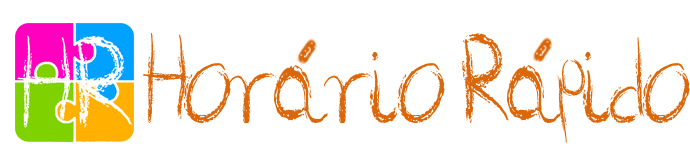
<style>
.page{position:relative;width:690px;height:168px;background:#ffffff}
.page>*{position:absolute;margin:0}
.t1{font:132.5px "ChalkboardbyMartavanEck";letter-spacing:-0.04em;color:#da6709;scale:0.77 1}
</style>
<div class="page">
<p class="t1" style="left:143px;top:33px;width:547px;height:110px">Horario Rapido</p>
</div>
